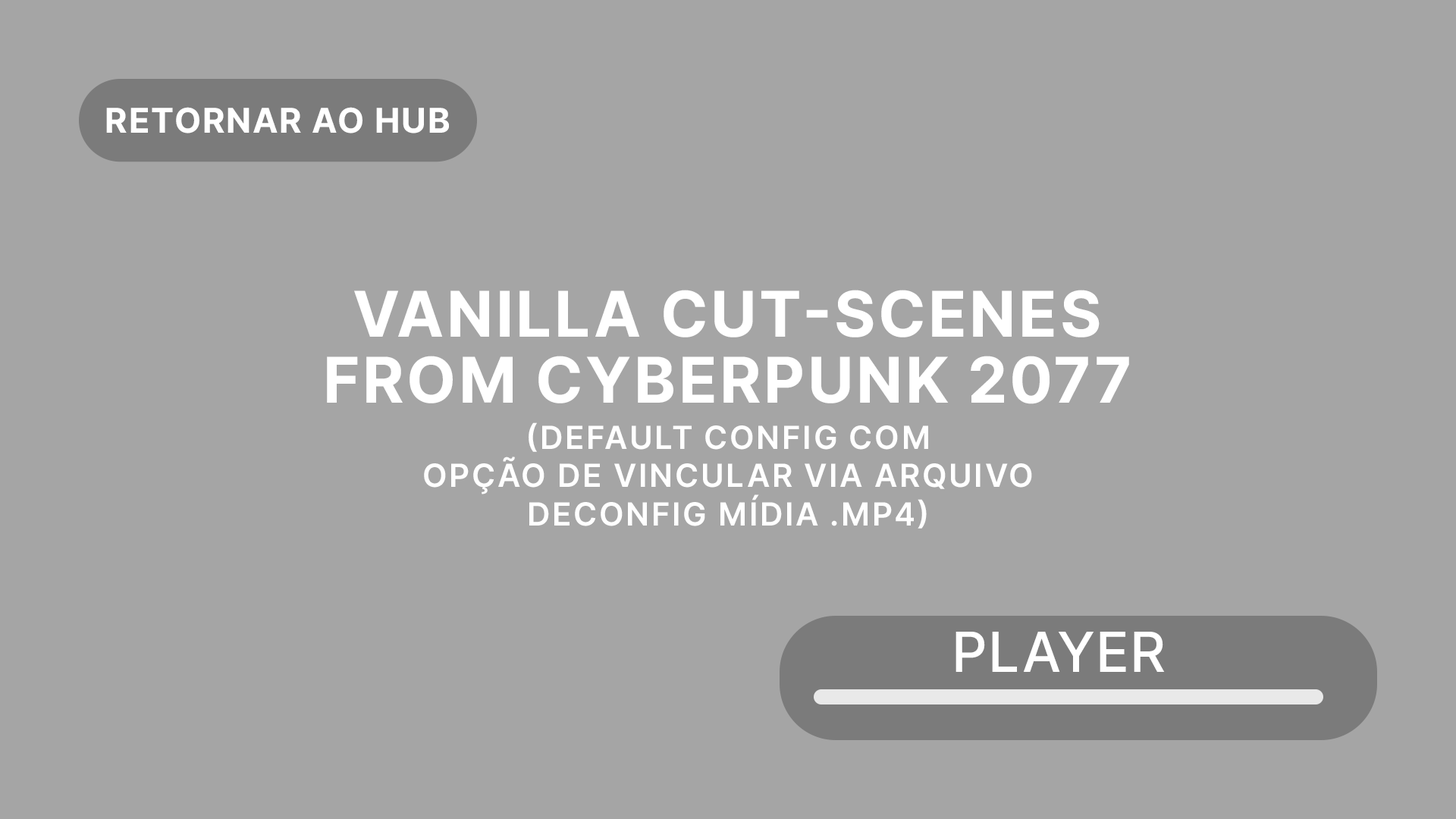
<style>
.page{position:relative;width:1456px;height:819px;background:#a5a5a5}
.page>*{position:absolute;margin:0}
.t1{font:34.1px "Inter-Bold";letter-spacing:0.03em;color:#ffffff;text-transform:uppercase}
.t2{font:63.2px/65.7px "Inter-Bold";letter-spacing:0.03em;color:#ffffff;text-transform:uppercase}
.t3{font:31.9px "Inter-SemiBold";letter-spacing:0.05em;color:#ffffff;text-transform:uppercase}
.t4{font:55.4px "Inter-Medium";color:#ffffff;text-transform:uppercase}
</style>
<div class="page">
<p class="t1" style="left:106px;top:107px;width:343px;height:26px">Retornar ao hub</p>
<p class="t2" style="left:327px;top:290px;width:802px;height:114px;text-align:center">VANILLA CUT-SCENES<br>FROM CYBERPUNK 2077</p>
<p class="t3" style="left:424px;top:422px;width:608px;height:107px;text-align:center">(DEFAULT CONFIG com<br>opção de vincular via arquivo<br>deconfig mídia .mp4)</p>
<p class="t4" style="left:955px;top:632px;width:210px;height:40px">PLAYER</p>
</div>
